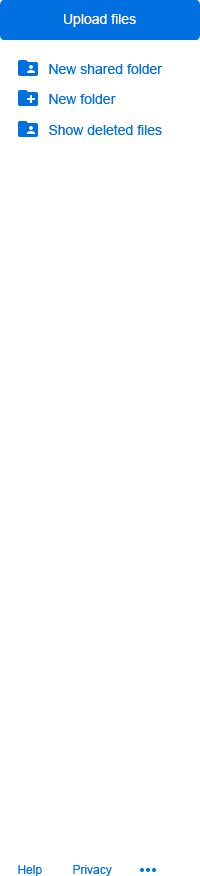
<style>
.page{position:relative;width:200px;height:876px;background:#ffffff}
.page>*{position:absolute;margin:0}
.t1{font:14px "ArialMT";color:#ffffff}
.t2{font:14px "ArialMT";color:#0070e0}
.t3{font:12px "ArialMT";color:#0070e0}
</style>
<div class="page">
<p class="t1" style="left:64px;top:14px;width:72px;height:13px">Upload files</p>
<p class="t2" style="left:49px;top:64px;width:114px;height:10px">New shared folder</p>
<p class="t2" style="left:49px;top:94px;width:67px;height:10px">New folder</p>
<p class="t2" style="left:49px;top:124px;width:113px;height:11px">Show deleted files</p>
<p class="t3" style="left:18px;top:865px;width:24px;height:11px">Help</p>
<p class="t3" style="left:73px;top:865px;width:39px;height:11px">Privacy</p>
</div>
